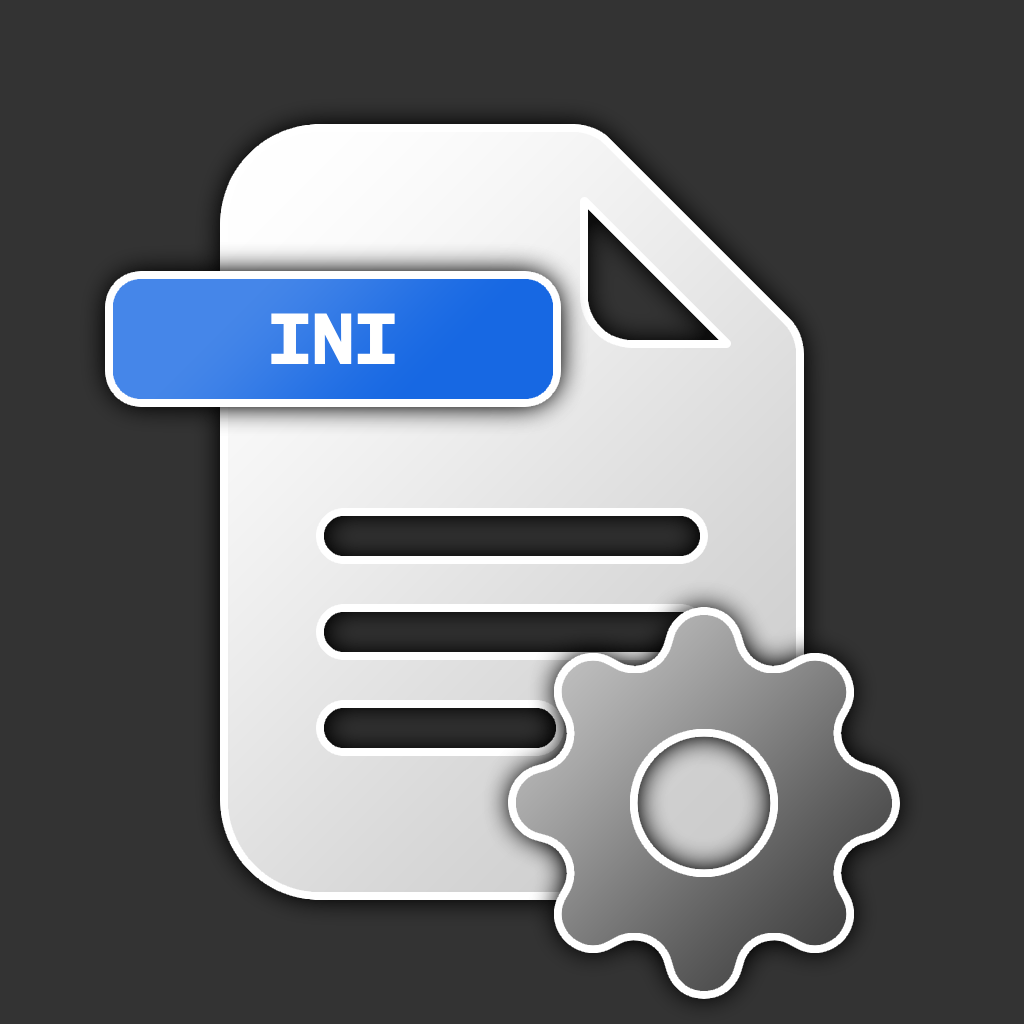
<style>
.page{position:relative;width:1024px;height:1024px;background:#333333}
.page>*{position:absolute;margin:0}
.t1{font:72px "RedHatMono-Bold";color:#ffffff}
</style>
<div class="page">
<p class="t1" style="left:271px;top:313px;width:124px;height:51px">INI</p>
</div>
